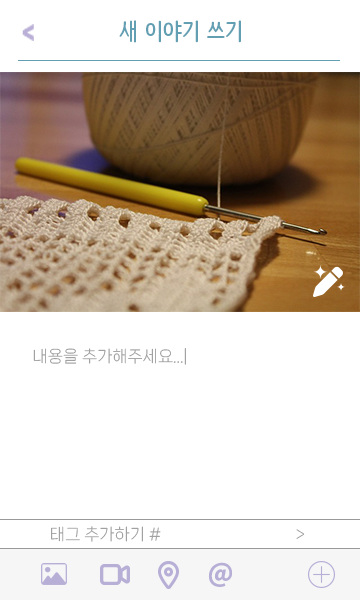
<style>
.page{position:relative;width:360px;height:600px;background:#ffffff}
.page>*{position:absolute;margin:0}
.t1{font:24px "NanumBarunpenOTF-Bold";color:#629fb2}
.t2{font:16px "NanumSquareNeo-Variable";color:#999999}
.t3{font:25px "NotoSansKR-Black";color:#b8afd7}
</style>
<div class="page">
<p class="t1" style="left:119px;top:20px;width:122px;height:23px">새 이야기 쓰기</p>
<p class="t2" style="left:33px;top:348px;width:153px;height:17px">내용을 추가해주세요...|</p>
<p class="t2" style="left:51px;top:526px;width:254px;height:16px">태그 추가하기 #                                   &gt;</p>
<p class="t3" style="left:208px;top:562px;width:25px;height:25px">@</p>
</div>
